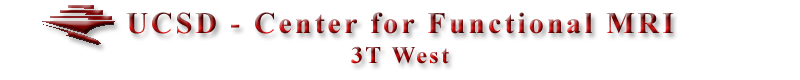
<style>
.page{position:relative;width:800px;height:80px;background:#ffffff}
.page>*{position:absolute;margin:0}
.t1{font:30px "TimesNewRomanPS-BoldMT";letter-spacing:0.1em}
.t2{font:24px "TimesNewRomanPS-BoldMT";letter-spacing:0.1em}
</style>
<div class="page">
<p class="t1" style="left:126px;top:12px;width:548px;height:22px">UCSD - Center for Functional MRI</p>
<p class="t2" style="left:351px;top:46px;width:98px;height:18px">3T West</p>
</div>
